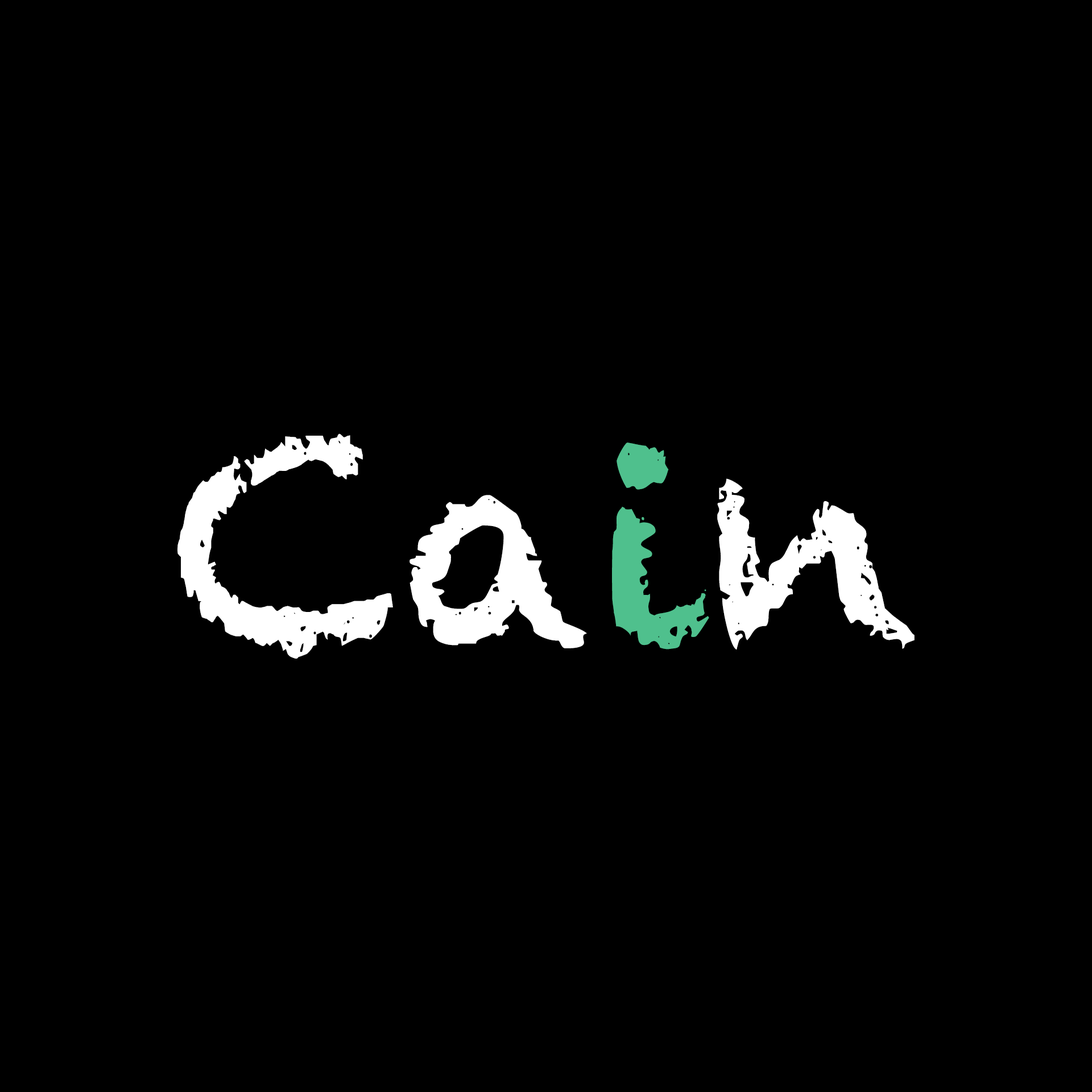
<style>
.page{position:relative;width:1092px;height:1092px;background:#000000}
.page>*{position:absolute;margin:0}
.t1{font:284.4px "Chalkduster";color:#ffffff}
.t2{font:284.4px "Chalkduster";color:#4fc08d}
</style>
<div class="page">
<p class="t1" style="left:177px;top:433px;width:738px;height:226px">Ca<span class="t2">i</span>n</p>
</div>
